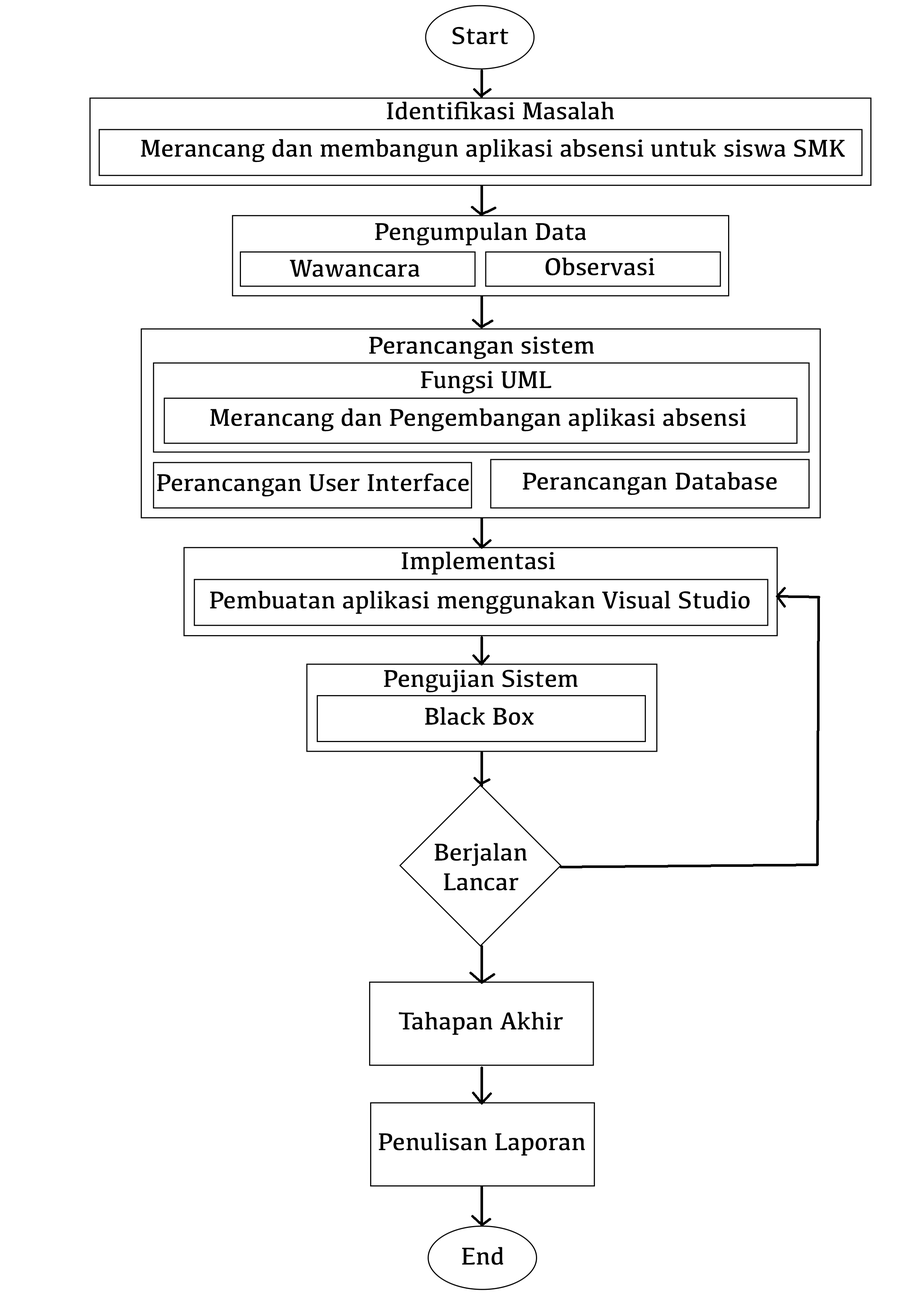
<style>
.page{position:relative;width:918px;height:1299px;background:#ffffff}
.page>*{position:absolute;margin:0}
.t1{font:25.2px "Kefa-Regular";color:#000000}
.t2{font:25.2px/29.5px "Kefa-Regular";color:#000000}
</style>
<div class="page">
<p class="t1" style="left:452px;top:27px;width:56px;height:17px">Start</p>
<p class="t1" style="left:387px;top:101px;width:227px;height:19px">Identifikasi Masalah</p>
<p class="t1" style="left:141px;top:139px;width:704px;height:23px">Merancang dan membangun aplikasi absensi untuk siswa SMK</p>
<p class="t1" style="left:375px;top:222px;width:211px;height:23px">Pengumpulan Data</p>
<p class="t1" style="left:545px;top:257px;width:110px;height:18px">Observasi</p>
<p class="t1" style="left:290px;top:260px;width:129px;height:17px">Wawancara</p>
<p class="t1" style="left:369px;top:336px;width:225px;height:23px">Perancangan sistem</p>
<p class="t1" style="left:421px;top:371px;width:131px;height:23px">Fungsi UML</p>
<p class="t1" style="left:210px;top:408px;width:536px;height:23px">Merancang dan Pengembangan aplikasi absensi</p>
<p class="t1" style="left:157px;top:473px;width:312px;height:23px">Perancangan User Interface</p>
<p class="t1" style="left:523px;top:472px;width:254px;height:23px">Perancangan Database</p>
<p class="t1" style="left:402px;top:551px;width:153px;height:24px">Implementasi</p>
<p class="t1" style="left:210px;top:591px;width:540px;height:23px">Pembuatan aplikasi menggunakan Visual Studio</p>
<p class="t1" style="left:384px;top:669px;width:194px;height:23px">Pengujian Sistem</p>
<p class="t1" style="left:425px;top:707px;width:109px;height:18px">Black Box</p>
<p class="t2" style="left:435px;top:843px;width:92px;height:47px;text-align:center">Berjalan<br>Lancar</p>
<p class="t1" style="left:399px;top:1011px;width:164px;height:24px">Tahapan Akhir</p>
<p class="t1" style="left:379px;top:1132px;width:206px;height:23px">Penulisan Laporan</p>
<p class="t1" style="left:462px;top:1247px;width:42px;height:18px">End</p>
</div>
